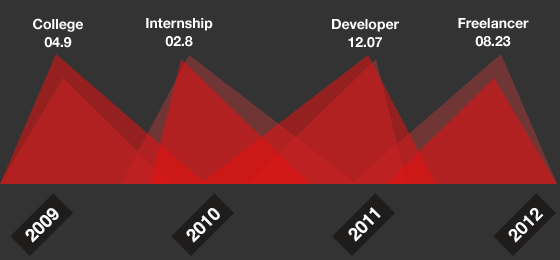
<style>
.page{position:relative;width:560px;height:260px;background:#333333}
.page>*{position:absolute;margin:0}
.t1{font:14px/18px "HelveticaNeue-Bold";color:#ffffff}
</style>
<div class="page">
<p class="t1" style="left:33px;top:18px;width:50px;height:30px;text-align:center">College<br>04.9</p>
<p class="t1" style="left:146px;top:18px;width:67px;height:29px;text-align:center">Internship<br>02.8</p>
<p class="t1" style="left:332px;top:19px;width:67px;height:29px;text-align:center">Developer<br>12.07</p>
<p class="t1" style="left:458px;top:18px;width:71px;height:29px;text-align:center">Freelancer<br>08.23</p>
</div>
